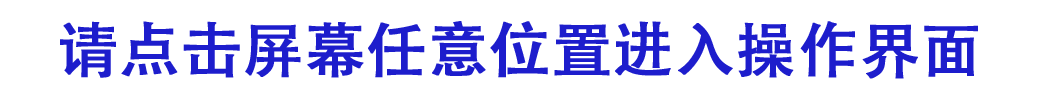
<style>
.page{position:relative;width:1050px;height:100px;background:#ffffff}
.page>*{position:absolute;margin:0}
.t1{font:60px "AdobeHeitiStd-Regular";color:#1d1dcc;font-weight:bold}
</style>
<div class="page">
<p class="t1" style="left:60px;top:21px;width:918px;height:58px">请点击屏幕任意位置进入操作界面</p>
</div>
